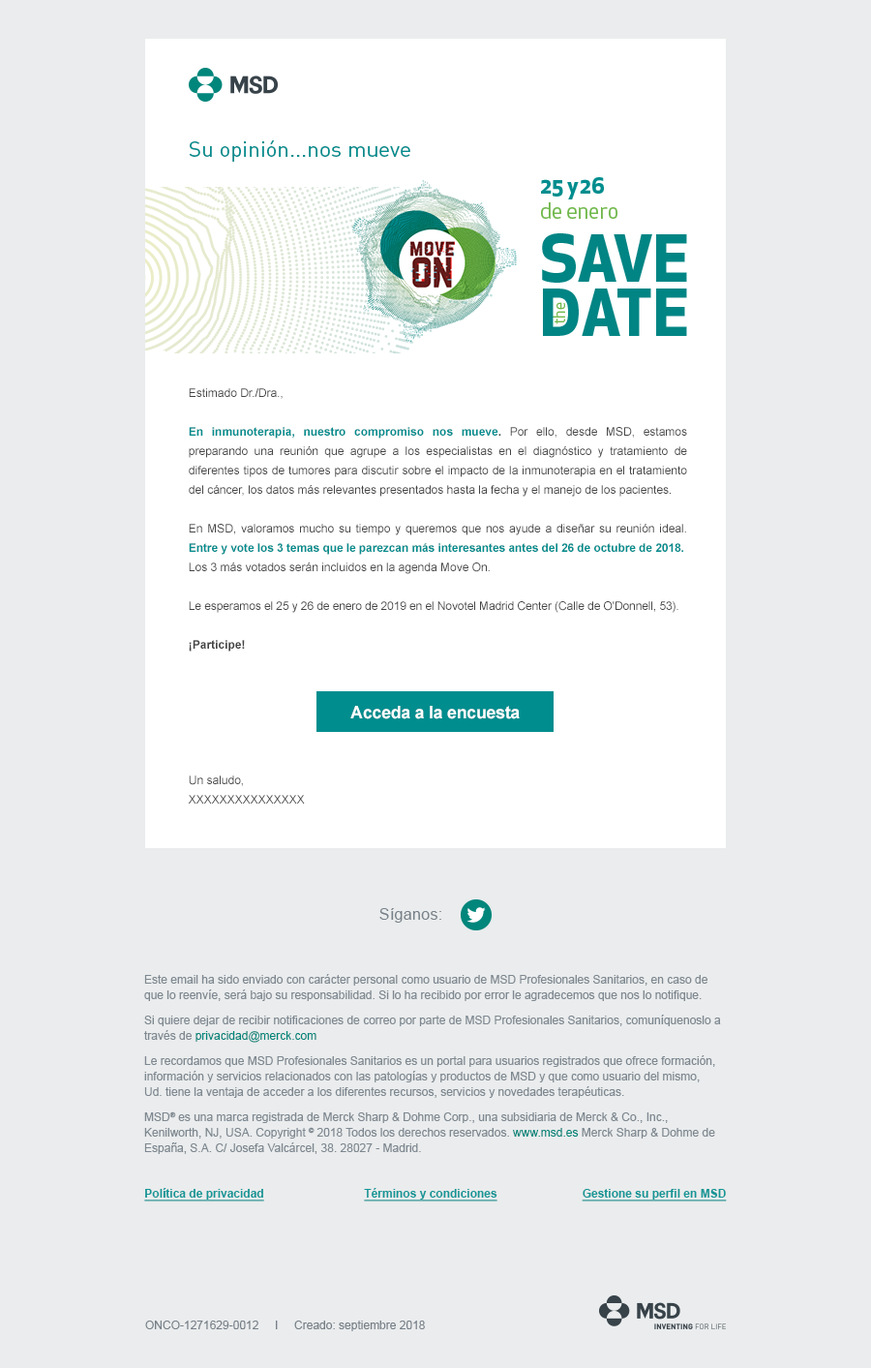
<style>
.page{position:relative;width:871px;height:1368px;background:#eaeced}
.page>*{position:absolute;margin:0}
.t1{font:21.8px "DINOT";color:#008d8e}
.t2{font:11.6px/19.4px "ArialMT";color:#444444}
.t3{font:11.6px/19.4px "Arial-BoldMT";color:#008d8e}
.t4{font:11.6px/19.4px "Arial-BoldMT";color:#444444}
.t5{font:11.6px/19.4px "Arial-BoldMT";letter-spacing:-0.007em;color:#008d8e}
.t6{font:11.6px/19.4px "ArialMT";letter-spacing:-0.008em;color:#444444}
.t7{font:17.4px "Arial-BoldMT";letter-spacing:-0.02em;color:#ffffff}
.t8{font:15.5px "ArialMT";letter-spacing:0.02em;color:#788189}
.t9{font:11.6px/15.5px "ArialMT";color:#7e8890}
.t10{font:11.6px/15.5px "ArialMT";color:#00867b}
.t11{font:11.6px "Arial-BoldMT";color:#139696;text-decoration:underline}
.t12{font:11.6px "ArialMT";color:#778088}
</style>
<div class="page">
<p class="t1" style="left:189px;top:140px;width:222px;height:22px">Su opinión...nos mueve</p>
<p class="t2" style="left:188px;top:388px;width:500px;height:416px;text-align:justify">Estimado Dr./Dra.,<br> <br><span class="t3">En inmunoterapia, nuestro compromiso nos mueve</span><span class="t4">. </span>Por ello, desde MSD, estamos preparando una reunión que agrupe a los especialistas en el diagnóstico y tratamiento de diferentes tipos de tumores para discutir sobre el impacto de la inmunoterapia en el tratamiento del cáncer, los datos más relevantes presentados hasta la fecha y el manejo de los pacientes.<br><br>En MSD, valoramos mucho su tiempo y queremos que nos ayude a diseñar su reunión ideal. <span class="t5">Entre y vote los 3 temas que le parezcan más interesantes antes del 26 de octubre de 2018.<br></span>Los 3 más votados serán incluidos en la agenda Move On.<br><br><span class="t6">Le esperamos el 25 y 26 de enero de 2019 en el Novotel Madrid Center (Calle de O'Donnell, 53).<br><br></span><span class="t4">¡Participe!<br></span> <br><br><br><br><br><br>Un saludo,<br>XXXXXXXXXXXXXXX</p>
<p class="t7" style="left:351px;top:706px;width:169px;height:13px">Acceda a la encuesta</p>
<p class="t8" style="left:380px;top:908px;width:62px;height:15px">Síganos:</p>
<p class="t9" style="left:144px;top:974px;width:577px;height:180px">Este email ha sido enviado con carácter personal como usuario de MSD Profesionales Sanitarios, en caso de que lo reenvíe, será bajo su responsabilidad. Si lo ha recibido por error le agradecemos que nos lo notifique. <br>Si quiere dejar de recibir notificaciones de correo por parte de MSD Profesionales Sanitarios, comuníquenoslo a través de <span class="t10">privacidad@merck.com</span> <br>Le recordamos que MSD Profesionales Sanitarios es un portal para usuarios registrados que ofrece formación, información y servicios relacionados con las patologías y productos de MSD y que como usuario del mismo,<br>Ud. tiene la ventaja de acceder a los diferentes recursos, servicios y novedades terapéuticas. <br>MSD® es una marca registrada de Merck Sharp &amp; Dohme Corp., una subsidiaria de Merck &amp; Co., Inc., Kenilworth, NJ, USA. Copyright © 2018 Todos los derechos reservados. <span class="t10">www.msd.es</span> Merck Sharp &amp; Dohme de España, S.A. C/ Josefa Valcárcel, 38. 28027 - Madrid.</p>
<p class="t11" style="left:144px;top:1188px;width:120px;height:14px">Política de privacidad</p>
<p class="t11" style="left:364px;top:1188px;width:134px;height:14px">Términos y condiciones</p>
<p class="t11" style="left:582px;top:1189px;width:145px;height:13px">Gestione su perfil en MSD</p>
<p class="t12" style="left:145px;top:1321px;width:280px;height:10px">ONCO-1271629-0012     I     Creado: septiembre 2018</p>
</div>
